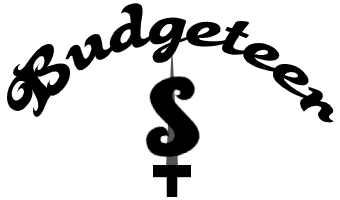
<style>
.page{position:relative;width:340px;height:200px;background:#ffffff}
.page>*{position:absolute;margin:0}
.t1{font:71px "BlackRose";color:#000000}
</style>
<div class="page">
<p class="t1" style="left:7px;top:3px;width:327px;height:120px">Budgeteer</p>
</div>
